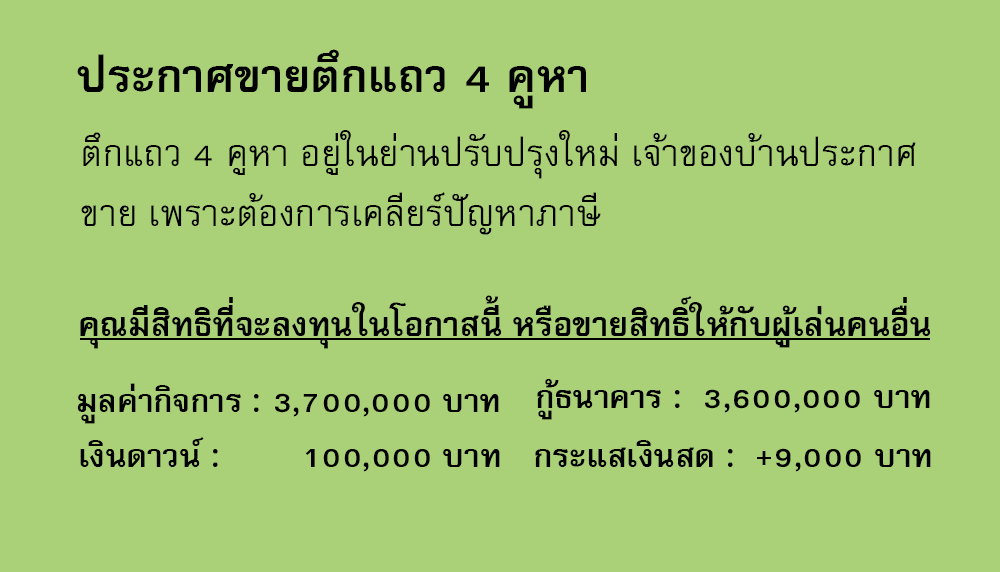
<style>
.page{position:relative;width:1000px;height:572px;background:#aad178}
.page>*{position:absolute;margin:0}
.t1{font:64px "FreesiaUPCBold";color:#000000}
.t2{font:51px/60px "FreesiaUPC";color:#000000}
.t3{font:47px "FreesiaUPCBold";color:#000000}
.t4{font:45px "FreesiaUPCBold";color:#000000}
</style>
<div class="page">
<p class="t1" style="left:77px;top:49px;width:509px;height:60px">ประกาศขายตึกแถว 4 คูหา</p>
<p class="t2" style="left:81px;top:130px;width:835px;height:105px">ตึกแถว 4 คูหา อยู่ในย่านปรับปรุงใหม่ เจ้าของบ้านประกาศ<br>ขาย เพราะต้องการเคลียร์ปัญหาภาษี</p>
<p class="t3" style="left:80px;top:295px;width:851px;height:54px">คุณมีสิทธิที่จะลงทุนในโอกาสนี้ หรือขายสิทธิ์ให้กับผู้เล่นคนอื่น</p>
<p class="t4" style="left:77px;top:383px;width:422px;height:41px">มูลค่ากิจการ : 3,700,000 บาท</p>
<p class="t4" style="left:537px;top:379px;width:393px;height:41px">กู้ธนาคาร :  3,600,000 บาท</p>
<p class="t4" style="left:80px;top:436px;width:420px;height:36px">เงินดาวน์ :        100,000 บาท</p>
<p class="t4" style="left:535px;top:440px;width:396px;height:32px">กระแสเงินสด :  +9,000 บาท</p>
</div>
